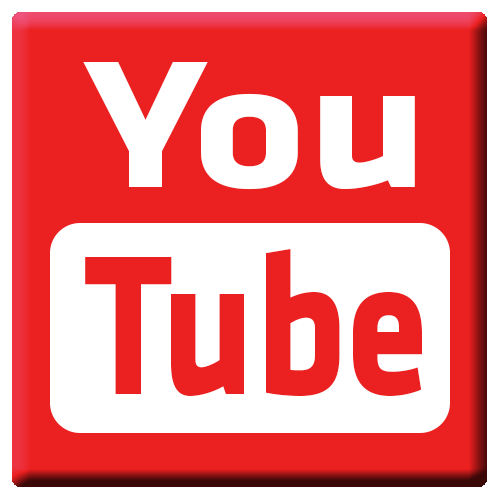
<style>
.page{position:relative;width:500px;height:500px;background:#eb2020}
.page>*{position:absolute;margin:0}
.t1{font:187.2px "Klavika-Bold";color:#ffffff;scale:1.18 1}
.t2{font:205.5px "Klavika-Bold";color:#ec2020;scale:0.83 1}
</style>
<div class="page">
<p class="t1" style="left:83px;top:62px;width:332px;height:128px">You</p>
<p class="t2" style="left:85px;top:249px;width:337px;height:148px">Tube</p>
</div>
